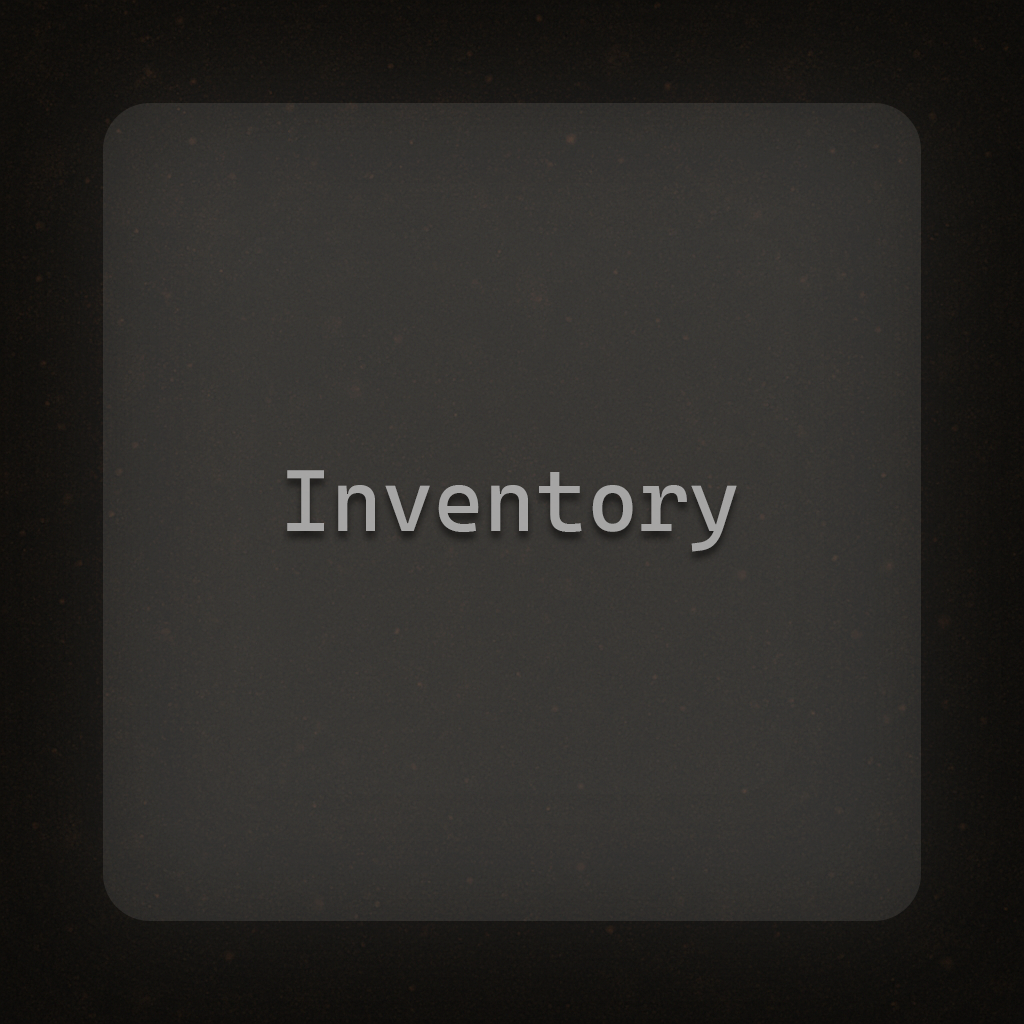
<style>
.page{position:relative;width:1024px;height:1024px}
.page>*{position:absolute;margin:0}
.t1{font:87.4px "CascadiaCode-Roman";color:#a6a5a4;font-weight:bold}
</style>
<div class="page">
<p class="t1" style="left:287px;top:470px;width:450px;height:82px">Inventory</p>
</div>
